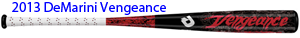
<style>
.page{position:relative;width:300px;height:38px;background:#ffffff}
.page>*{position:absolute;margin:0}
.t1{font:14px "MyriadPro-Regular";color:#0000ff}
</style>
<div class="page">
<p class="t1" style="left:12px;top:2px;width:154px;height:13px">2013 DeMarini Vengeance</p>
</div>
